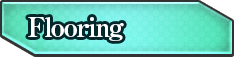
<style>
.page{position:relative;width:234px;height:57px}
.page>*{position:absolute;margin:0}
.t1{font:27px "RyuminPro-ExBold";letter-spacing:-0.08em;color:#ffffff}
</style>
<div class="page">
<p class="t1" style="left:28px;top:17px;width:96px;height:24px">Flooring</p>
</div>
